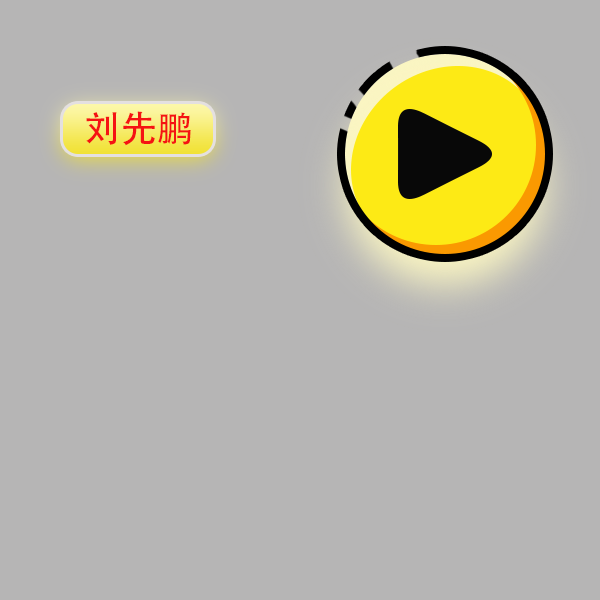
<style>
.page{position:relative;width:600px;height:600px;background:#b6b5b5}
.page>*{position:absolute;margin:0}
.t1{font:36px "AdobeHeitiStd-Regular";color:#f51313}
</style>
<div class="page">
<p class="t1" style="left:86px;top:111px;width:105px;height:35px">刘先鹏</p>
</div>
